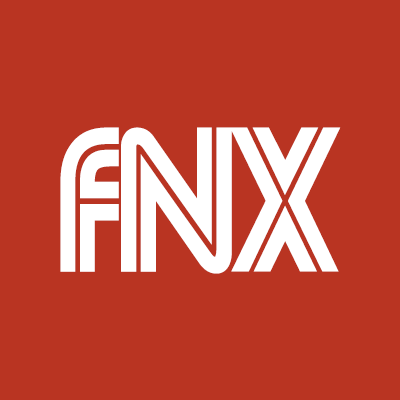
<style>
.page{position:relative;width:400px;height:400px;background:#b93422}
.page>*{position:absolute;margin:0}
.t1{font:200px "CNN";color:#ffffff}
</style>
<div class="page">
<p class="t1" style="left:60px;top:127px;width:281px;height:147px">FNX</p>
</div>
